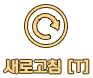
<style>
.page{position:relative;width:93px;height:78px;background:#ffffff}
.page>*{position:absolute;margin:0}
.t1{font:14.7px "ONEMobileTitleRegular";color:#ffdc96;font-weight:bold}
</style>
<div class="page">
<p class="t1" style="left:4px;top:59px;width:85px;height:15px">새로고침 [T]</p>
</div>
